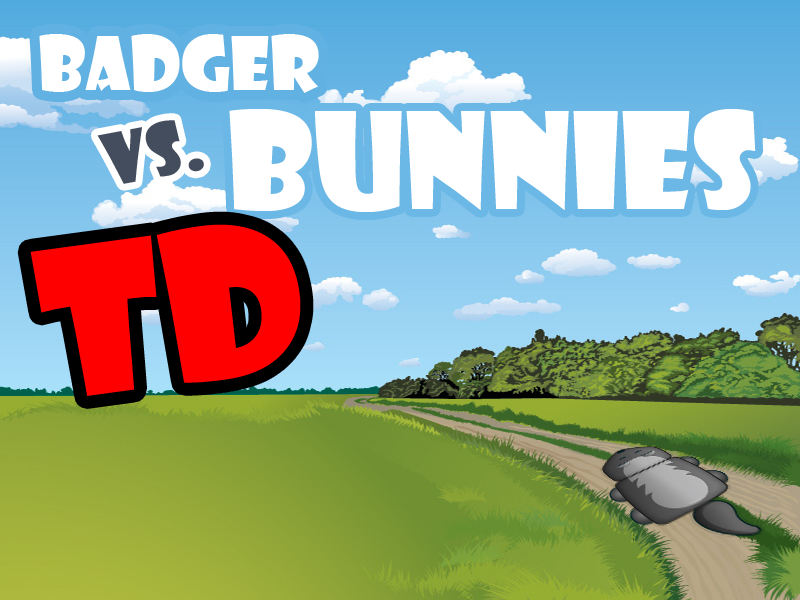
<style>
.page{position:relative;width:800px;height:600px}
.page>*{position:absolute;margin:0}
.t1{font:72px "ShowcardGothic-Reg";color:#ffffff}
.t2{font:130px "ShowcardGothic-Reg";color:#ffffff}
.t3{font:70px "ShowcardGothic-Reg";color:#444d5d}
.t4{font:200px "ShowcardGothic-Reg";color:#ff0000}
</style>
<div class="page">
<p class="t1" style="left:39px;top:34px;width:280px;height:59px">Badger</p>
<p class="t2" style="left:229px;top:109px;width:527px;height:103px">Bunnies</p>
<p class="t3" style="left:97px;top:120px;width:107px;height:64px;rotate:-11deg">vs.</p>
<p class="t4" style="left:30px;top:224px;width:271px;height:172px;rotate:-8deg">TD</p>
</div>
